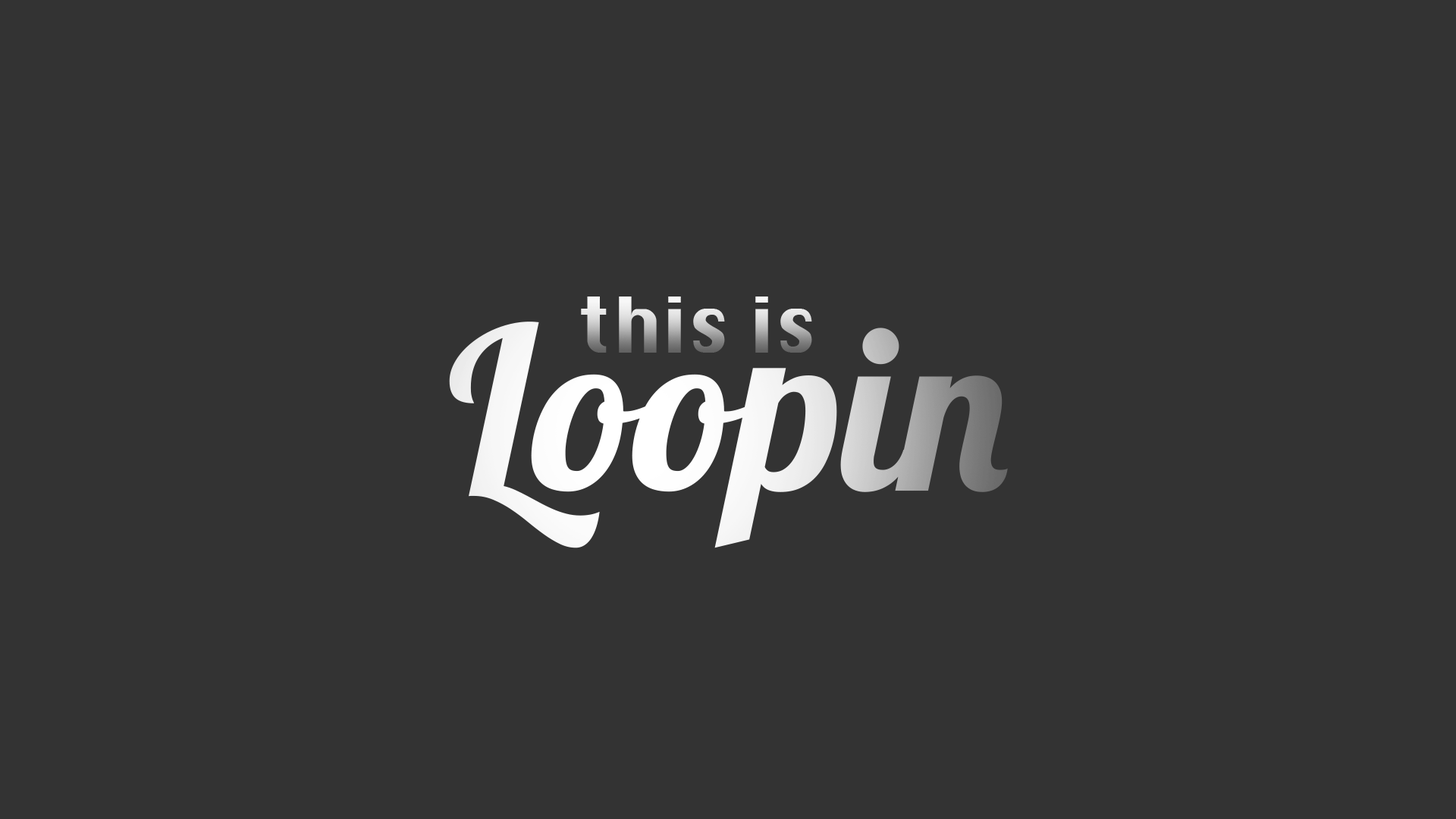
<style>
.page{position:relative;width:1456px;height:819px;background:#333333}
.page>*{position:absolute;margin:0}
.t1{font:74.9px "Krungthep"}
.t2{font:228.6px "Lobster-Regular";color:#ffffff}
</style>
<div class="page">
<p class="t1" style="left:581px;top:297px;width:231px;height:56px">this is</p>
<p class="t2" style="left:449px;top:322px;width:559px;height:226px">Loopin</p>
</div>
